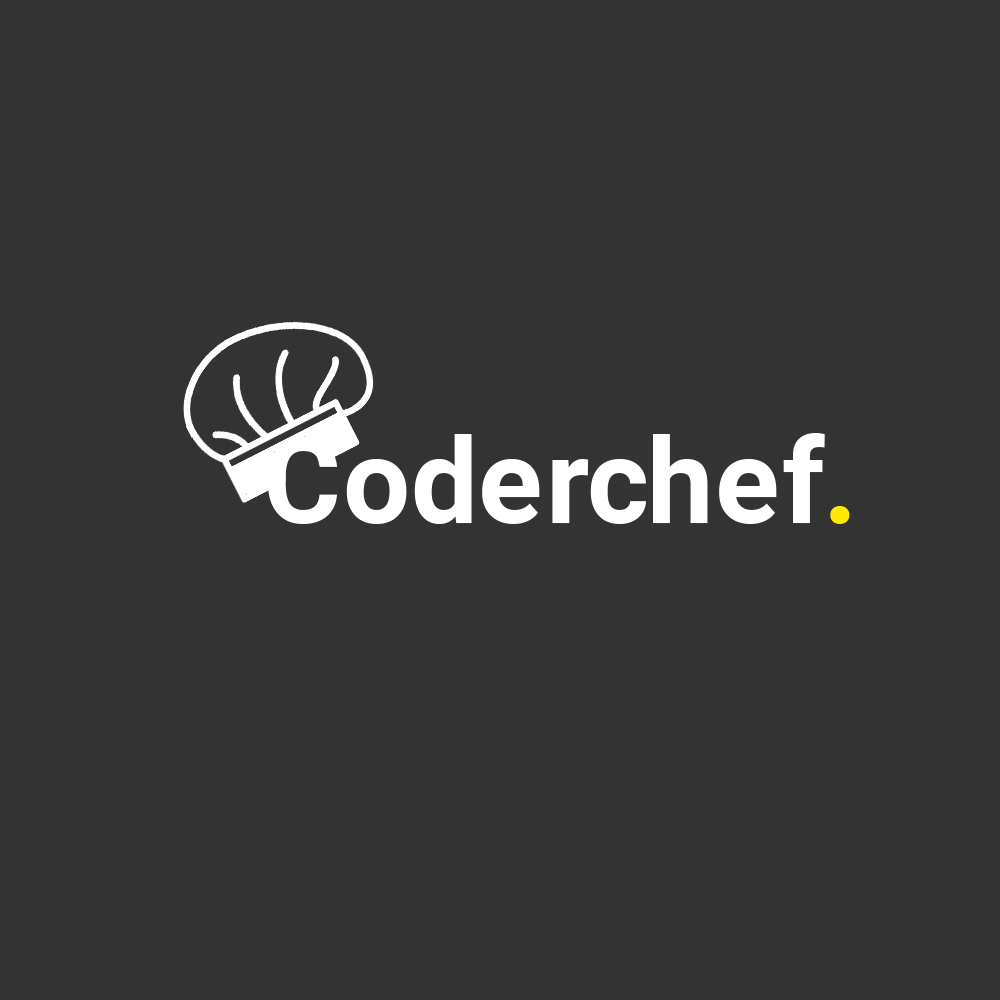
<style>
.page{position:relative;width:1000px;height:1000px;background:#333333}
.page>*{position:absolute;margin:0}
.t1{font:119.3px "Roboto-Bold";letter-spacing:0.01em;color:#ffffff}
.t2{font:119.3px "Roboto-Bold";letter-spacing:0.01em;color:#ffea00}
</style>
<div class="page">
<p class="t1" style="left:268px;top:433px;width:582px;height:91px">Coderchef<span class="t2">.</span></p>
</div>
